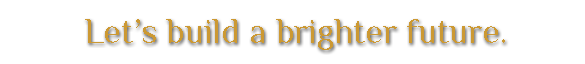
<style>
.page{position:relative;width:585px;height:64px;background:#ffffff}
.page>*{position:absolute;margin:0}
.t1{font:36px "Philosopher";color:#cc9933}
</style>
<div class="page">
<p class="t1" style="left:85px;top:19px;width:420px;height:31px">Let’s build a brighter future.</p>
</div>
